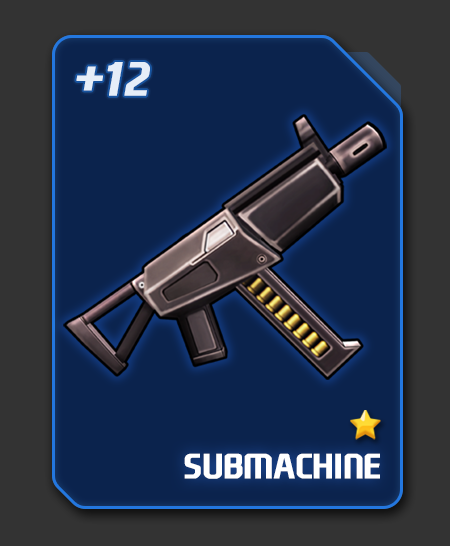
<style>
.page{position:relative;width:450px;height:546px;background:#0b234d}
.page>*{position:absolute;margin:0}
.t1{font:45.4px "NEXONFootballGothicB";letter-spacing:-0.06em;color:#e6eef8;font-weight:bold;font-style:italic}
.t2{font:33.5px "NEXONFootballGothicB";letter-spacing:-0.02em;color:#ffffff;text-transform:uppercase;font-weight:bold}
</style>
<div class="page">
<p class="t1" style="left:76px;top:62px;width:74px;height:34px">+12</p>
<p class="t2" style="left:184px;top:453px;width:196px;height:26px">submachine</p>
</div>
